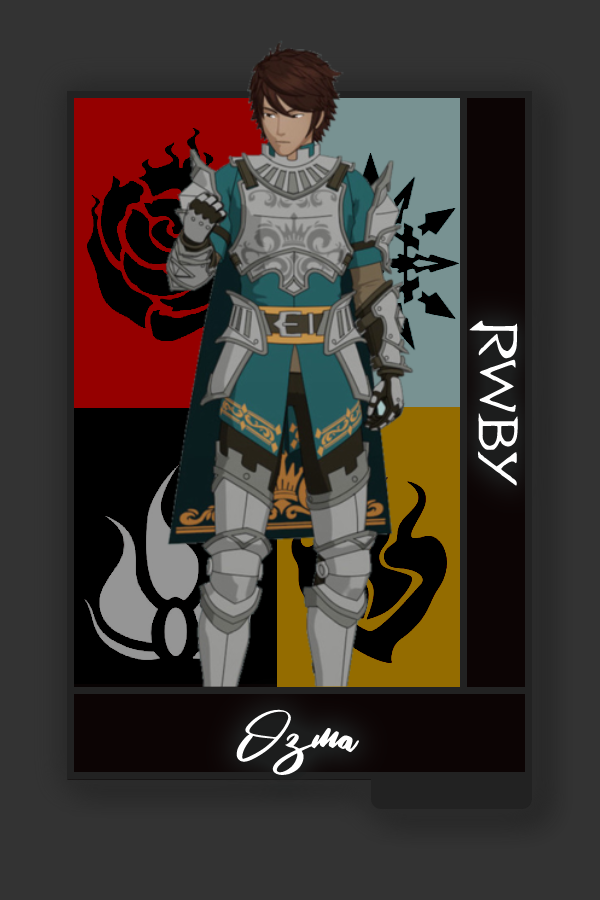
<style>
.page{position:relative;width:600px;height:900px;background:#333333}
.page>*{position:absolute;margin:0}
.t1{font:61.3px "RWBY_Style";color:#ffffff;scale:1.25 1}
.t2{font:76.6px "RosegaFREE";color:#ffffff;scale:0.91 1}
</style>
<div class="page">
<p class="t1" style="left:469px;top:320px;width:49px;height:166px;rotate:90deg">RWBY</p>
<p class="t2" style="left:236px;top:709px;width:124px;height:69px">Ozma</p>
</div>
